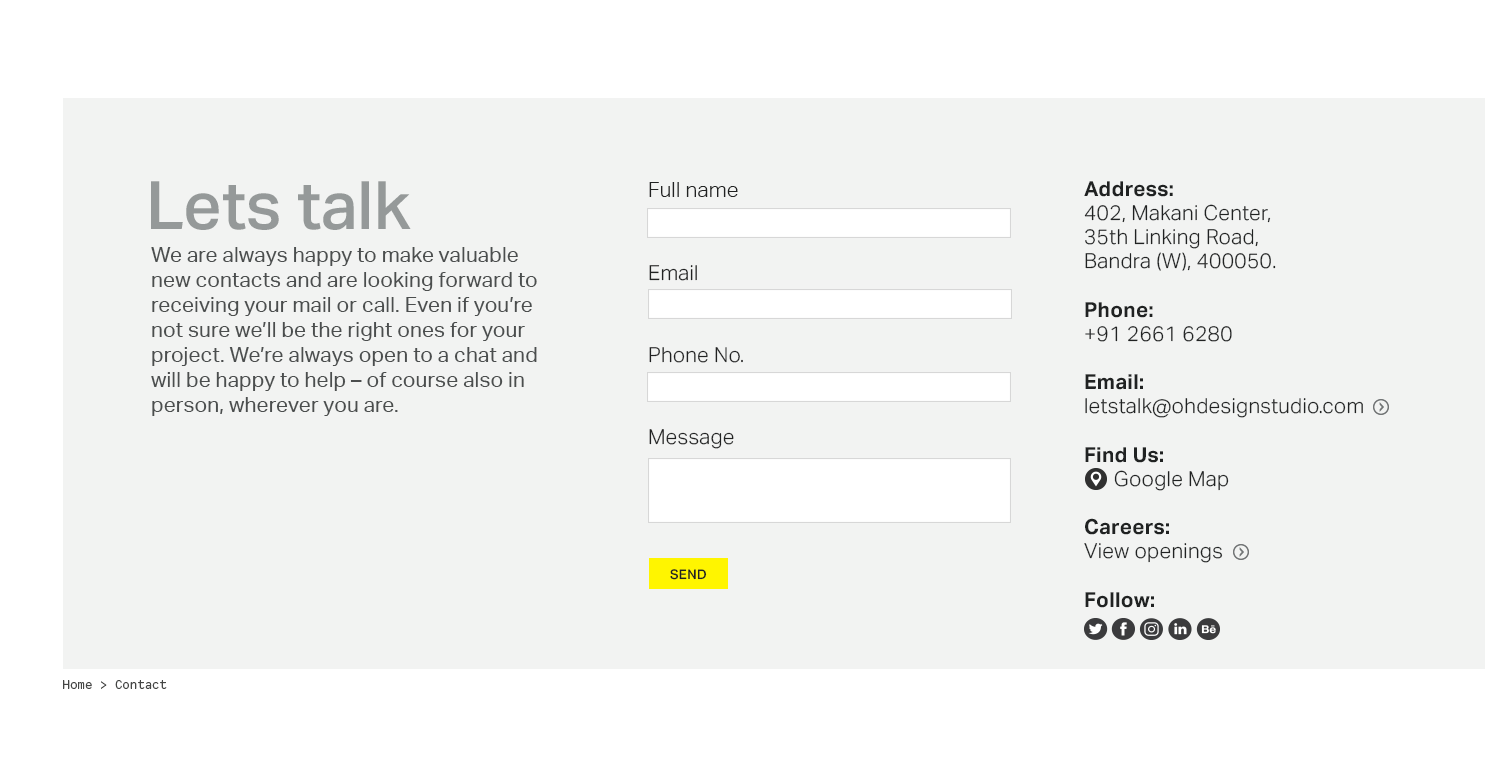
<style>
.page{position:relative;width:1485px;height:768px;background:#f2f3f2}
.page>*{position:absolute;margin:0}
.t1{font:66.7px "AktivGroteskW06-Medium";color:#959999}
.t2{font:20.8px "AktivGroteskW06-Light";letter-spacing:0.015em;color:#212222}
.t3{font:20.8px/24.2px "AktivGroteskW06-Light";letter-spacing:0.015em;color:#202222}
.t4{font:20.8px/24.2px "AktivGroteskW06-Bold";letter-spacing:0.015em;color:#202222}
.t5{font:20.8px/25px "AktivGroteskW06-Regular";letter-spacing:0.01em;color:#4b4e4e}
.t6{font:13.3px "AktivGroteskW06-Medium";letter-spacing:0.025em;color:#212222}
.t7{font:13.3px "CodeSaver-Regular";color:#454645}
</style>
<div class="page">
<p class="t1" style="left:151px;top:181px;width:260px;height:49px">Lets talk</p>
<p class="t2" style="left:649px;top:182px;width:89px;height:15px">Full name</p>
<p class="t3" style="left:1084px;top:181px;width:279px;height:427px"><span class="t4">Address:<br></span>402, Makani Center,<br>35th Linking Road,<br>Bandra (W), 400050.<br><br><span class="t4">Phone:<br></span>+91 2661 6280<br><br><span class="t4">Email: <br></span>letstalk@ohdesignstudio.com<br><br><span class="t4">Find Us: <br></span>      Google Map<br><span class="t4"><br>Careers:<br></span>View openings<br><br><span class="t4">Follow:</span></p>
<p class="t5" style="left:151px;top:247px;width:386px;height:169px">We are always happy to make valuable new contacts and are looking forward to receiving your mail or call. Even if you’re not sure we’ll be the right ones for your project. We’re always open to a chat and will be happy to help – of course also in person, wherever you are.</p>
<p class="t2" style="left:649px;top:265px;width:48px;height:16px">Email</p>
<p class="t2" style="left:649px;top:347px;width:94px;height:16px">Phone No.</p>
<p class="t2" style="left:649px;top:429px;width:85px;height:20px">Message</p>
<p class="t6" style="left:670px;top:569px;width:37px;height:11px">SEND</p>
<p class="t7" style="left:63px;top:680px;width:104px;height:9px">Home &gt; Contact</p>
</div>
